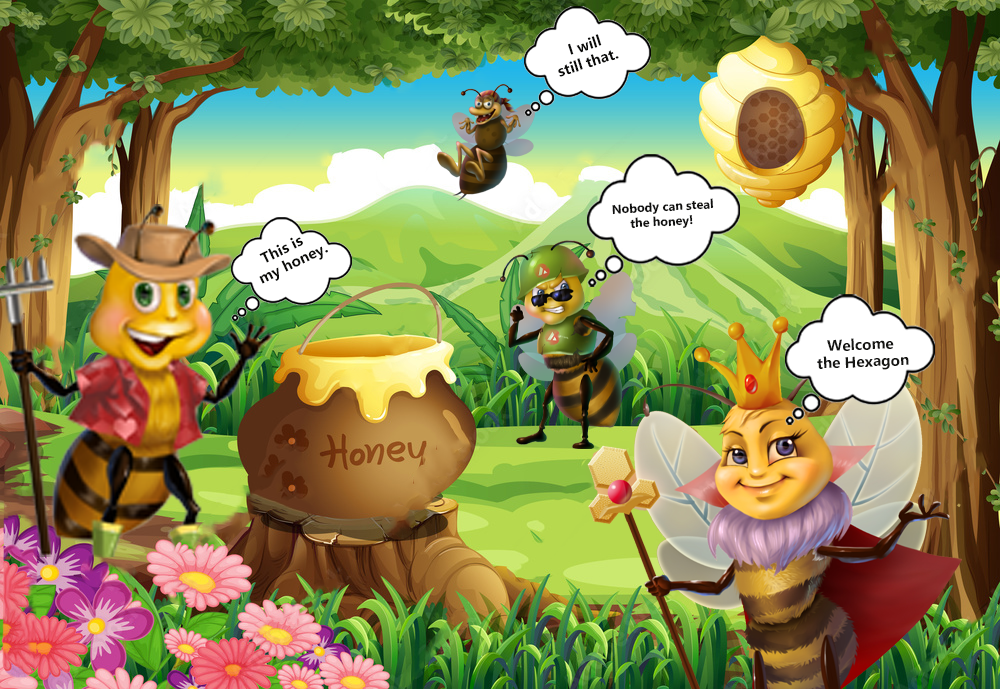
<style>
.page{position:relative;width:1000px;height:689px}
.page>*{position:absolute;margin:0}
.t1{font:14.2px "MicrosoftYaHei-Bold";color:#0b0b0a}
.t2{font:12.5px "LeelawadeeUI-Bold";color:#10100f}
.t3{font:14.2px "MicrosoftYaHei-Bold";color:#0c0c09}
.t4{font:14.2px "MicrosoftYaHei-Bold";color:#161614}
</style>
<div class="page">
<p class="t1" style="left:558px;top:34px;width:61px;height:43px;text-align:center;rotate:-18deg">I will<br>still that.</p>
<p class="t2" style="left:612px;top:198px;width:102px;height:31px;text-align:center;rotate:-3deg">Nobody can steal <br>the honey!</p>
<p class="t3" style="left:259px;top:237px;width:69px;height:47px;text-align:center;rotate:-26deg">This is <br> my honey.</p>
<p class="t4" style="left:817px;top:338px;width:92px;height:32px;text-align:center;rotate:-2deg">Welcome <br>the Hexagon</p>
</div>
